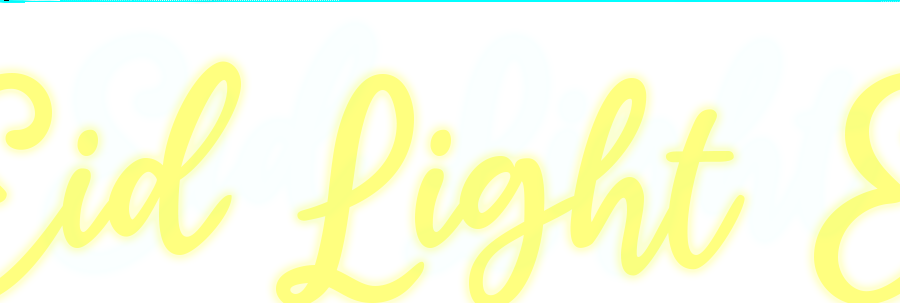
<style>
.page{position:relative;width:900px;height:303px;background:#ffffff}
.page>*{position:absolute;margin:0}
.t1{font:230px "LoftyGoals-Regular"}
</style>
<div class="page">
<p class="t1" style="left:42px;top:23px;width:831px;height:248px">Eid Light</p>
</div>
